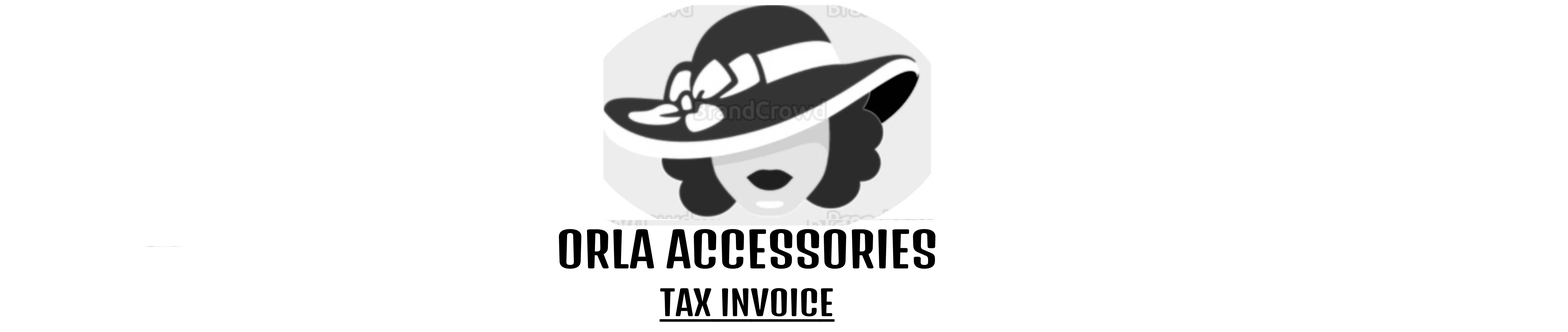
<style>
.page{position:relative;width:1568px;height:332px;background:#ffffff}
.page>*{position:absolute;margin:0}
.t1{font:47.4px "DenkOne-Regular";color:#000000}
.t2{font:33.8px "DenkOne-Regular";color:#000000;text-decoration:underline}
</style>
<div class="page">
<p class="t1" style="left:559px;top:229px;width:377px;height:93px;text-align:center">ORLA ACCESSORIES<br><span class="t2">TAX INVOICE</span></p>
</div>
